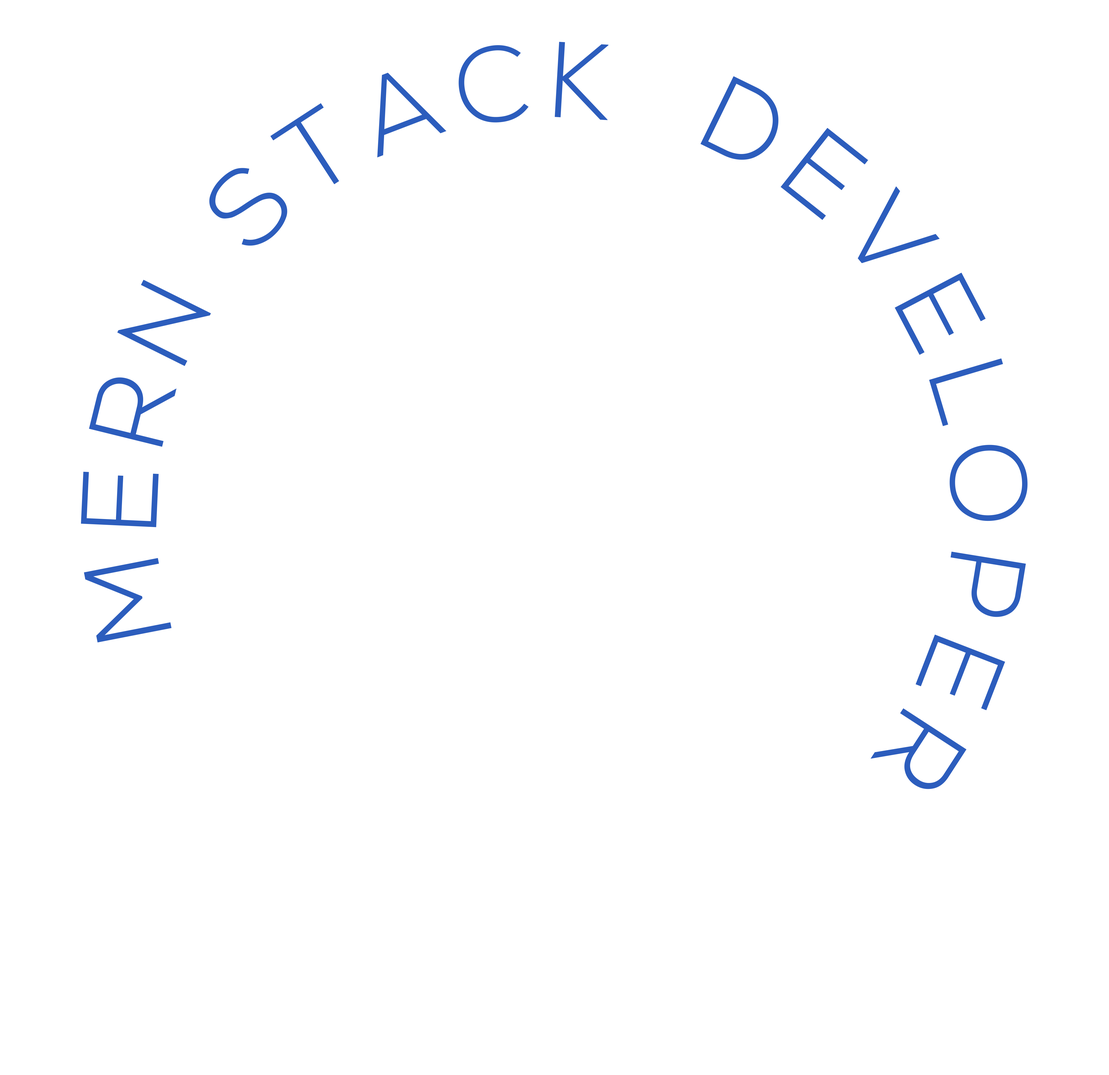
<style>
.page{position:relative;width:1109px;height:1075px;background:#ffffff}
.page>*{position:absolute;margin:0}
.t1{font:107.6px "NexaLight";color:#2c5dbd}
</style>
<div class="page">
<p class="t1" style="left:81px;top:42px;width:947px;height:747px">M E R N  S T A C K   D E V E L O P E R</p>
</div>
